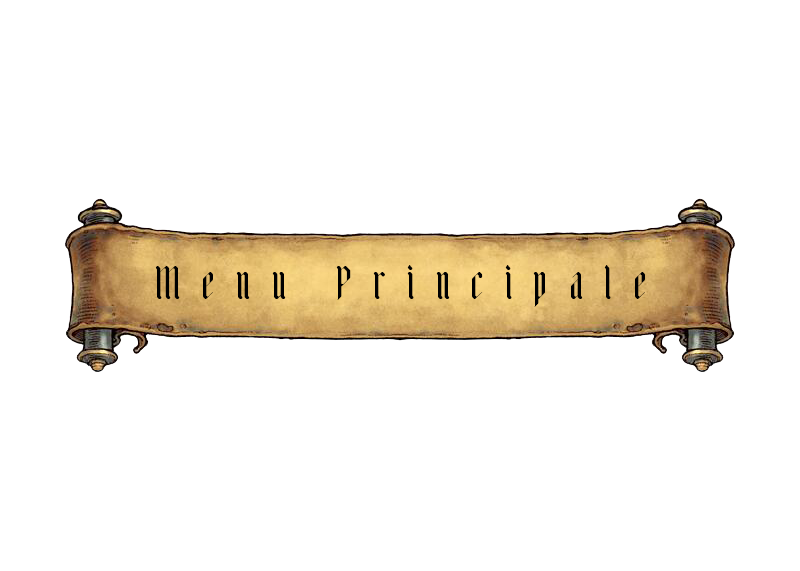
<style>
.page{position:relative;width:800px;height:571px;background:#ffffff}
.page>*{position:absolute;margin:0}
.t1{font:50px "Adlibitum";letter-spacing:0.44em;color:#000000}
</style>
<div class="page">
<p class="t1" style="left:155px;top:265px;width:490px;height:42px">Menu Principale</p>
</div>
